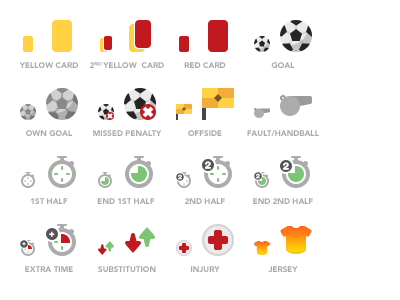
<style>
.page{position:relative;width:400px;height:300px;background:#ffffff}
.page>*{position:absolute;margin:0}
.t1{font:8px "AvenirLTStd-Black";color:#a8a9ab;text-transform:uppercase}
.t2{font:10px "HelveticaNeueLTStd-Blk";color:#ffffff;text-transform:uppercase}
.t3{font:6.2px "HelveticaNeueLTStd-Blk";color:#ffffff;text-transform:uppercase}
</style>
<div class="page">
<p class="t1" style="left:19px;top:62px;width:59px;height:6px">Yellow Card</p>
<p class="t1" style="left:90px;top:62px;width:74px;height:6px">2nd Yellow  Card</p>
<p class="t1" style="left:184px;top:62px;width:42px;height:6px">Red Card</p>
<p class="t1" style="left:271px;top:62px;width:24px;height:6px">Goal</p>
<p class="t1" style="left:26px;top:130px;width:46px;height:6px">Own Goal</p>
<p class="t1" style="left:93px;top:130px;width:69px;height:6px">Missed penalty</p>
<p class="t1" style="left:188px;top:130px;width:34px;height:6px">Offside</p>
<p class="t1" style="left:247px;top:129px;width:72px;height:8px">Fault/Handball</p>
<p class="t2" style="left:205px;top:161px;width:6px;height:8px">2</p>
<p class="t3" style="left:178px;top:174px;width:4px;height:6px">2</p>
<p class="t3" style="left:256px;top:173px;width:4px;height:6px">2</p>
<p class="t2" style="left:283px;top:162px;width:6px;height:8px">2</p>
<p class="t1" style="left:30px;top:198px;width:38px;height:6px">1st Half</p>
<p class="t1" style="left:97px;top:198px;width:58px;height:6px">End 1st Half</p>
<p class="t1" style="left:185px;top:198px;width:40px;height:6px">2nd Half</p>
<p class="t1" style="left:253px;top:198px;width:60px;height:6px">End 2nd Half</p>
<p class="t2" style="left:49px;top:231px;width:6px;height:6px">+</p>
<p class="t3" style="left:22px;top:242px;width:4px;height:4px">+</p>
<p class="t1" style="left:25px;top:266px;width:48px;height:6px">Extra Time</p>
<p class="t1" style="left:98px;top:266px;width:58px;height:6px">substitution</p>
<p class="t1" style="left:191px;top:266px;width:29px;height:6px">injury</p>
<p class="t1" style="left:268px;top:266px;width:30px;height:6px">jersey</p>
</div>
